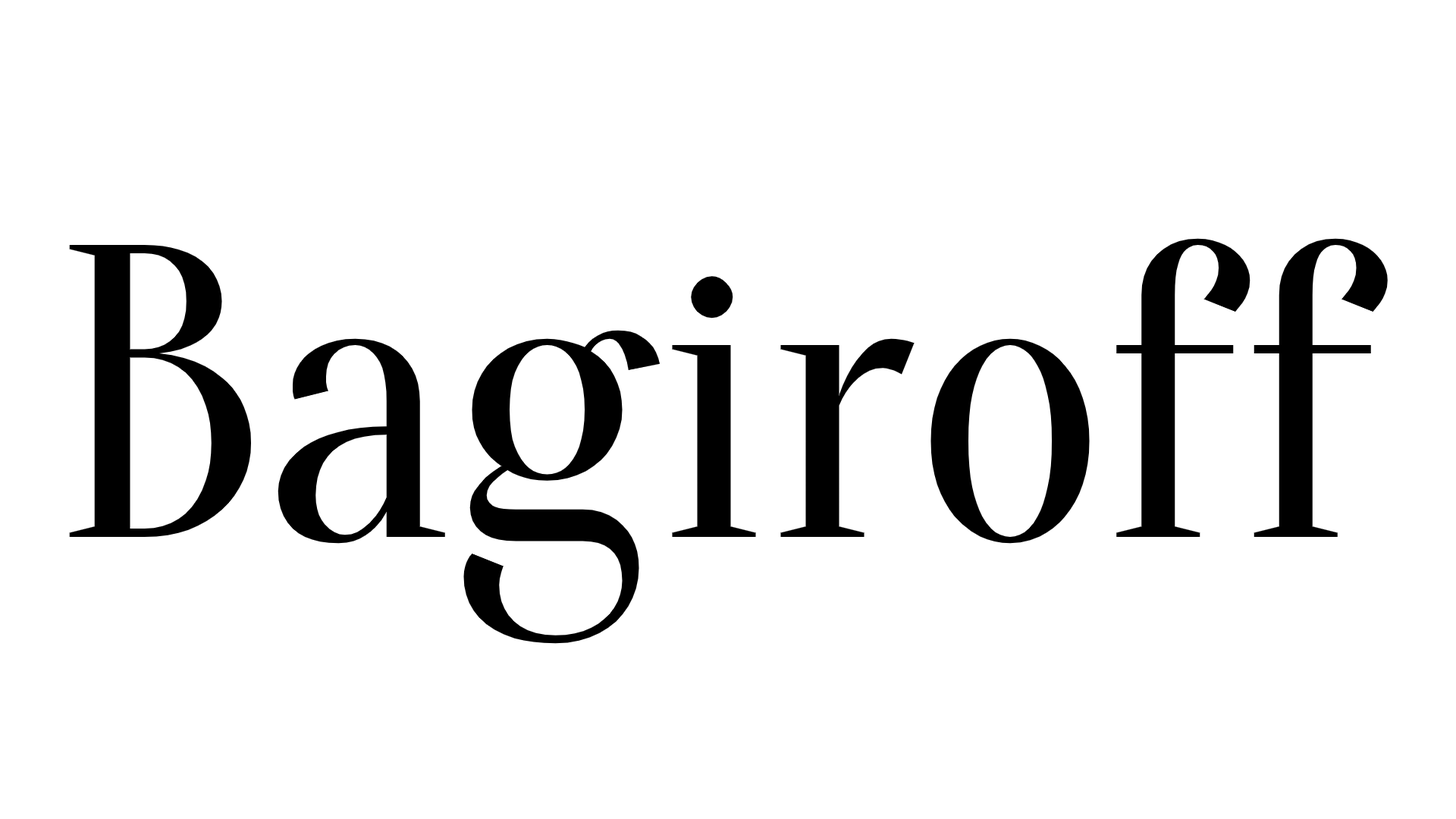
<style>
.page{position:relative;width:1456px;height:819px;background:#ffffff}
.page>*{position:absolute;margin:0}
.t1{font:417.1px "Oranienbaum-Regular";color:#000000}
</style>
<div class="page">
<p class="t1" style="left:69px;top:238px;width:1319px;height:406px">Bagiroff</p>
</div>
